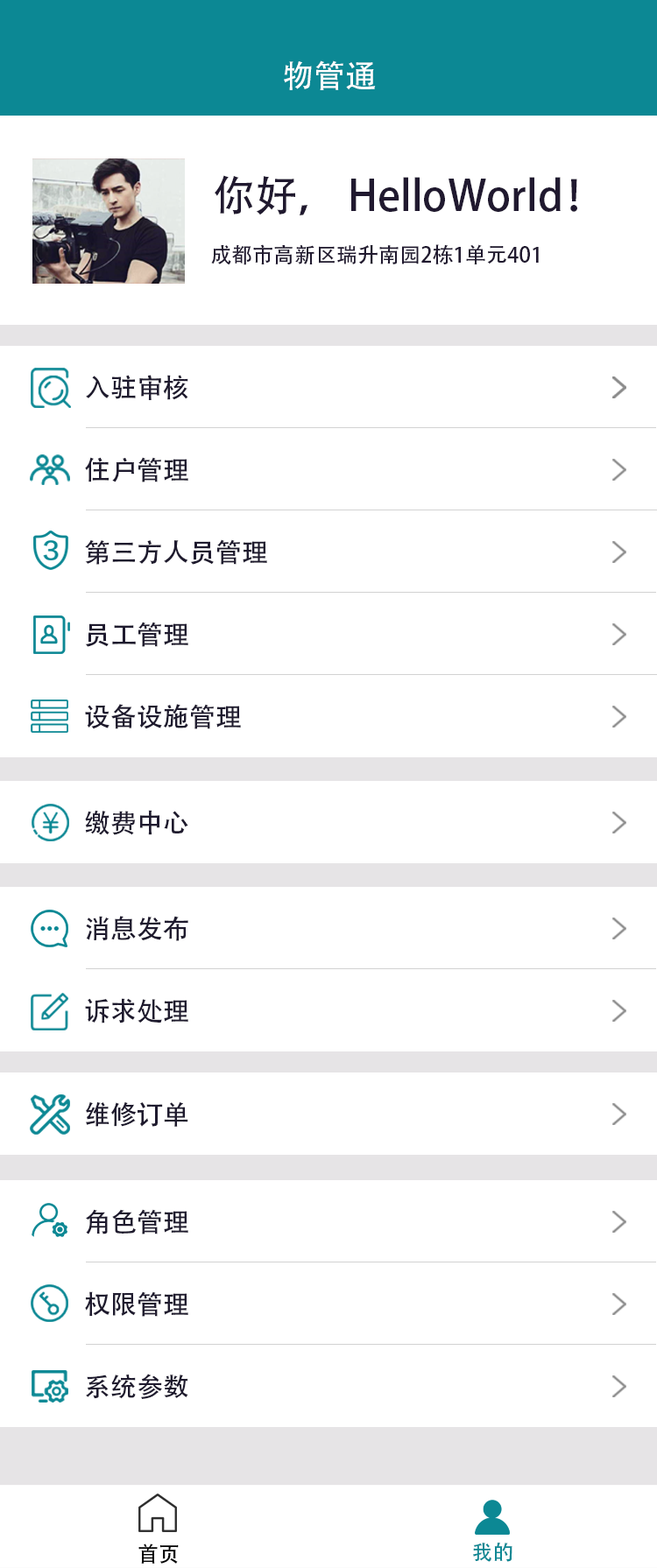
<style>
.page{position:relative;width:657px;height:1568px;background:#ffffff}
.page>*{position:absolute;margin:0}
.t1{font:31.5px "AdobeHeitiStd-Regular";color:#ffffff}
.t2{font:42px "AdobeHeitiStd-Regular";color:#20192f}
.t3{font:21px "AdobeHeitiStd-Regular";color:#20192f}
.t4{font:26.3px "AdobeHeitiStd-Regular";color:#1e1a2e}
.t5{font:21px "AdobeHeitiStd-Regular";color:#000000}
.t6{font:21px "AdobeHeitiStd-Regular";color:#0c8894}
</style>
<div class="page">
<p class="t1" style="left:284px;top:60px;width:92px;height:30px">物管通</p>
<p class="t2" style="left:214px;top:175px;width:363px;height:40px">你好， HelloWorld！</p>
<p class="t3" style="left:211px;top:244px;width:327px;height:21px">成都市高新区瑞升南园2栋1单元401</p>
<p class="t4" style="left:86px;top:375px;width:102px;height:25px">入驻审核</p>
<p class="t4" style="left:85px;top:457px;width:103px;height:25px">住户管理</p>
<p class="t4" style="left:85px;top:539px;width:182px;height:26px">第三方人员管理</p>
<p class="t4" style="left:85px;top:622px;width:103px;height:25px">员工管理</p>
<p class="t4" style="left:85px;top:704px;width:156px;height:25px">设备设施管理</p>
<p class="t4" style="left:85px;top:810px;width:103px;height:25px">缴费中心</p>
<p class="t4" style="left:86px;top:916px;width:102px;height:25px">消息发布</p>
<p class="t4" style="left:85px;top:998px;width:103px;height:25px">诉求处理</p>
<p class="t4" style="left:86px;top:1101px;width:102px;height:26px">维修订单</p>
<p class="t4" style="left:86px;top:1209px;width:102px;height:25px">角色管理</p>
<p class="t4" style="left:85px;top:1291px;width:103px;height:26px">权限管理</p>
<p class="t4" style="left:86px;top:1374px;width:102px;height:25px">系统参数</p>
<p class="t5" style="left:138px;top:1543px;width:41px;height:21px">首页</p>
<p class="t6" style="left:473px;top:1543px;width:39px;height:19px">我的</p>
</div>
